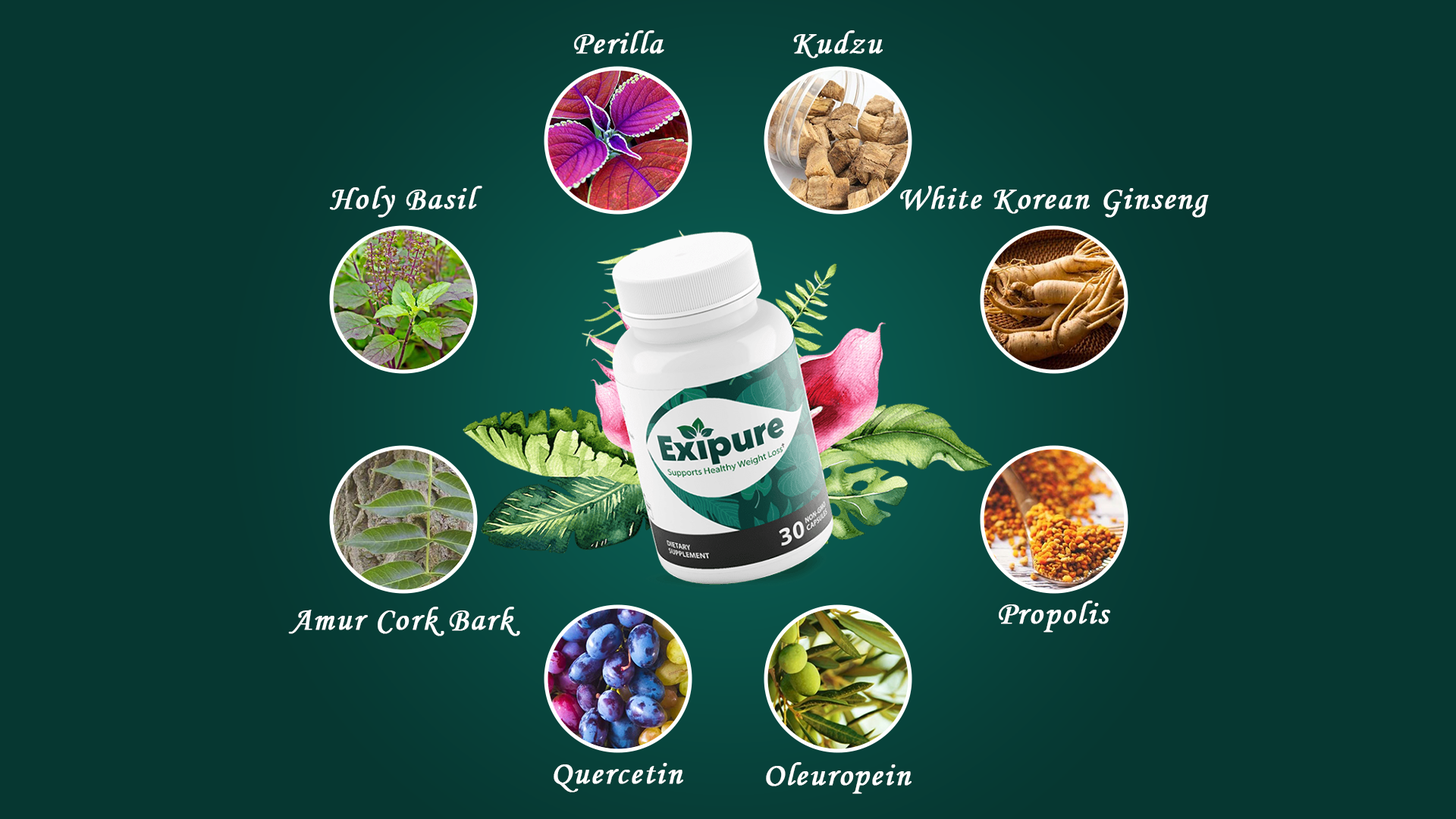
<style>
.page{position:relative;width:1456px;height:819px;background:#063731}
.page>*{position:absolute;margin:0}
.t1{font:32.4px "MonotypeCorsiva";letter-spacing:0.05em;color:#ffffff;font-weight:bold}
</style>
<div class="page">
<p class="t1" style="left:574px;top:30px;width:90px;height:24px">Perilla</p>
<p class="t1" style="left:793px;top:30px;width:90px;height:28px">Kudzu</p>
<p class="t1" style="left:330px;top:186px;width:152px;height:32px">Holy Basil</p>
<p class="t1" style="left:900px;top:186px;width:309px;height:32px">White Korean Ginseng</p>
<p class="t1" style="left:999px;top:601px;width:111px;height:31px">Propolis</p>
<p class="t1" style="left:288px;top:607px;width:232px;height:29px">Amur Cork Bark</p>
<p class="t1" style="left:554px;top:763px;width:129px;height:29px">Quercetin</p>
<p class="t1" style="left:766px;top:762px;width:146px;height:32px">Oleuropein</p>
</div>
